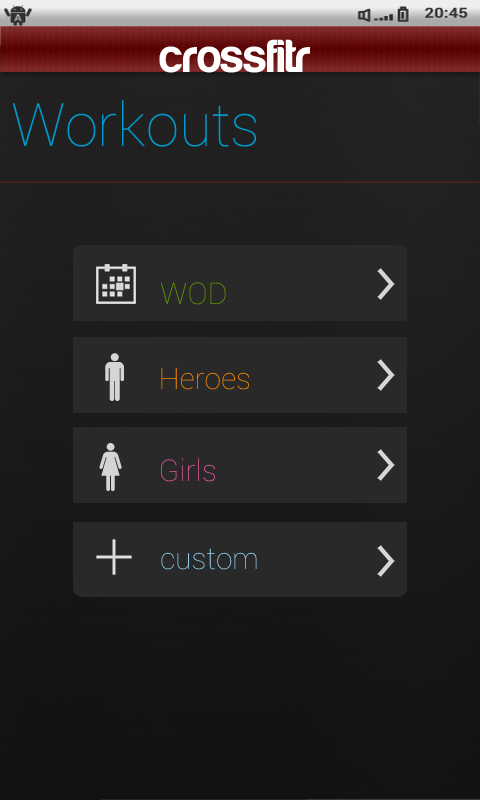
<style>
.page{position:relative;width:480px;height:800px;background:#292929}
.page>*{position:absolute;margin:0}
.t1{font:48px "Harabara";color:#ffffff}
.t2{font:60px "Roboto-Thin";color:#0099cc}
.t3{font:30px "Roboto-Thin";color:#669900}
.t4{font:48px "Travelcons";color:#d5d5d5}
.t5{font:30px "Roboto-Thin";color:#ff8800}
.t6{font:30px "Roboto-Thin";color:#e75aa1}
.t7{font:30px "Roboto-Thin";color:#93d2f3}
</style>
<div class="page">
<p class="t1" style="left:159px;top:39px;width:151px;height:34px">crossfitr</p>
<p class="t2" style="left:12px;top:100px;width:244px;height:47px">Workouts</p>
<p class="t3" style="left:161px;top:282px;width:65px;height:23px">WOD</p>
<p class="t4" style="left:105px;top:353px;width:19px;height:48px">q</p>
<p class="t5" style="left:161px;top:367px;width:88px;height:23px">Heroes</p>
<p class="t4" style="left:99px;top:443px;width:23px;height:48px">w</p>
<p class="t6" style="left:161px;top:458px;width:54px;height:24px">Girls</p>
<p class="t7" style="left:161px;top:548px;width:96px;height:22px">custom</p>
</div>
